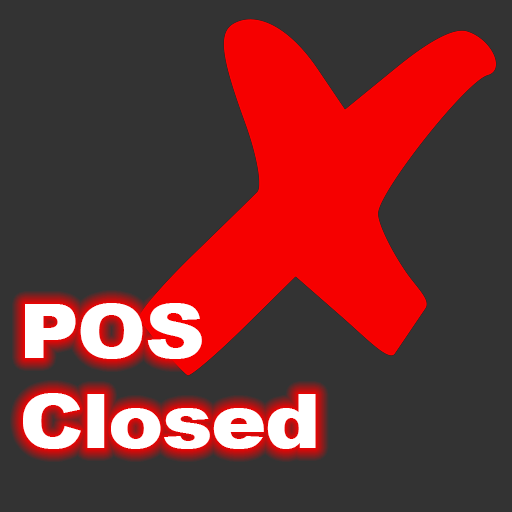
<style>
.page{position:relative;width:512px;height:512px;background:#333333}
.page>*{position:absolute;margin:0}
.t1{font:75px "Arial-Black";letter-spacing:-0.02em;color:#ffffff;scale:1.11 1}
</style>
<div class="page">
<p class="t1" style="left:23px;top:303px;width:293px;height:146px">POS<br>Closed</p>
</div>
